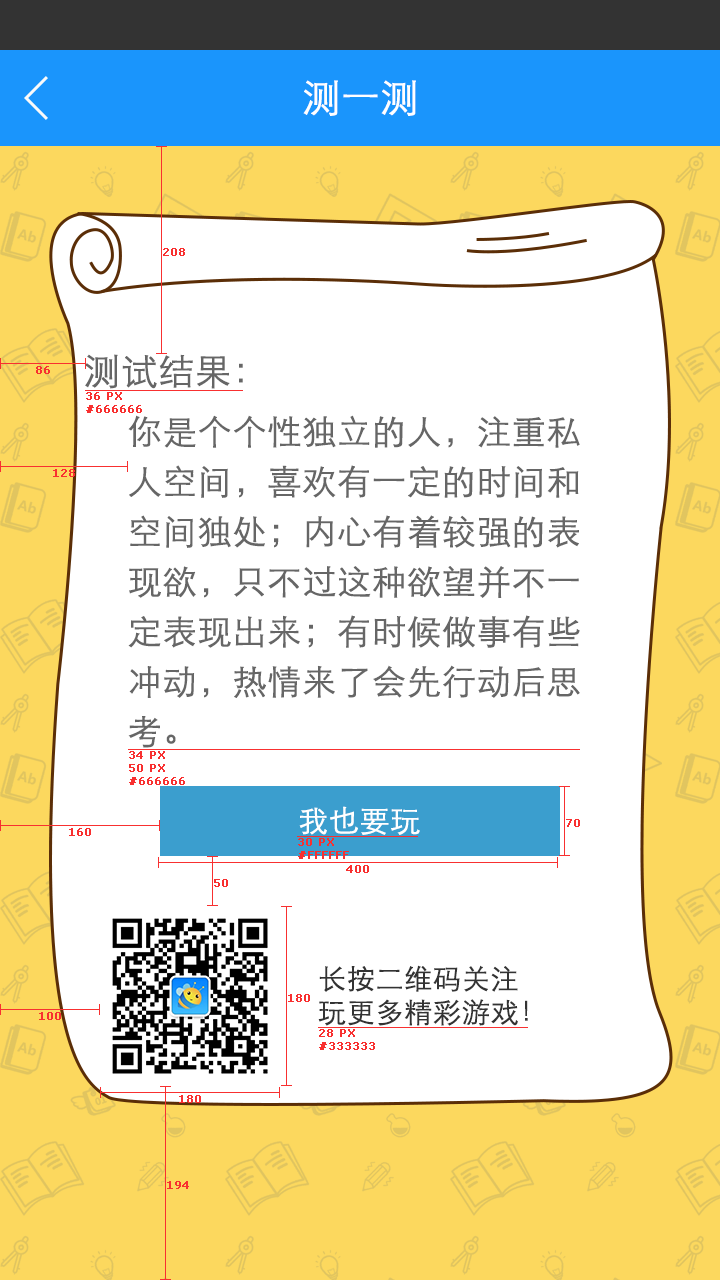
<style>
.page{position:relative;width:720px;height:1280px;background:#ffffff}
.page>*{position:absolute;margin:0}
.t1{font:38px "STXihei";color:#ffffff;font-weight:bold}
.t2{font:11px "Verdana";color:#f83030;font-weight:bold}
.t3{font:36px "STXihei";color:#666666;font-weight:bold}
.t4{font:34px/50px "STXihei";color:#666666;font-weight:bold}
.t5{font:30px "STXihei";color:#ffffff;font-weight:bold}
.t6{font:28px "STXihei";color:#333333;font-weight:bold}
</style>
<div class="page">
<p class="t1" style="left:303px;top:80px;width:113px;height:36px">测一测</p>
<p class="t2" style="left:163px;top:248px;width:22px;height:8px">208</p>
<p class="t2" style="left:36px;top:366px;width:14px;height:8px">86</p>
<p class="t3" style="left:85px;top:354px;width:158px;height:35px">测试结果：</p>
<p class="t2" style="left:86px;top:392px;width:56px;height:21px">36 PX<br>#666666</p>
<p class="t4" style="left:128px;top:415px;width:452px;height:333px">你是个个性独立的人，注重私<br>人空间，喜欢有一定的时间和<br>空间独处；内心有着较强的表<br>现欲，只不过这种欲望并不一<br>定表现出来；有时候做事有些<br>冲动，热情来了会先行动后思<br>考。</p>
<p class="t2" style="left:53px;top:469px;width:22px;height:8px">128</p>
<p class="t2" style="left:129px;top:751px;width:56px;height:34px">34 PX<br>50 PX<br>#666666</p>
<p class="t5" style="left:299px;top:806px;width:121px;height:29px">我也要玩</p>
<p class="t2" style="left:566px;top:819px;width:14px;height:8px">70</p>
<p class="t2" style="left:69px;top:828px;width:22px;height:8px">160</p>
<p class="t2" style="left:298px;top:838px;width:51px;height:21px">30 PX<br>#FFFFFF</p>
<p class="t2" style="left:346px;top:865px;width:23px;height:8px">400</p>
<p class="t2" style="left:214px;top:879px;width:14px;height:8px">50</p>
<p class="t6" style="left:318px;top:965px;width:210px;height:61px">长按二维码关注<br>玩更多精彩游戏！</p>
<p class="t2" style="left:288px;top:994px;width:22px;height:8px">180</p>
<p class="t2" style="left:39px;top:1012px;width:22px;height:8px">100</p>
<p class="t2" style="left:319px;top:1029px;width:56px;height:21px">28 PX<br>#333333</p>
<p class="t2" style="left:179px;top:1095px;width:22px;height:8px">180</p>
<p class="t2" style="left:167px;top:1181px;width:22px;height:8px">194</p>
</div>
